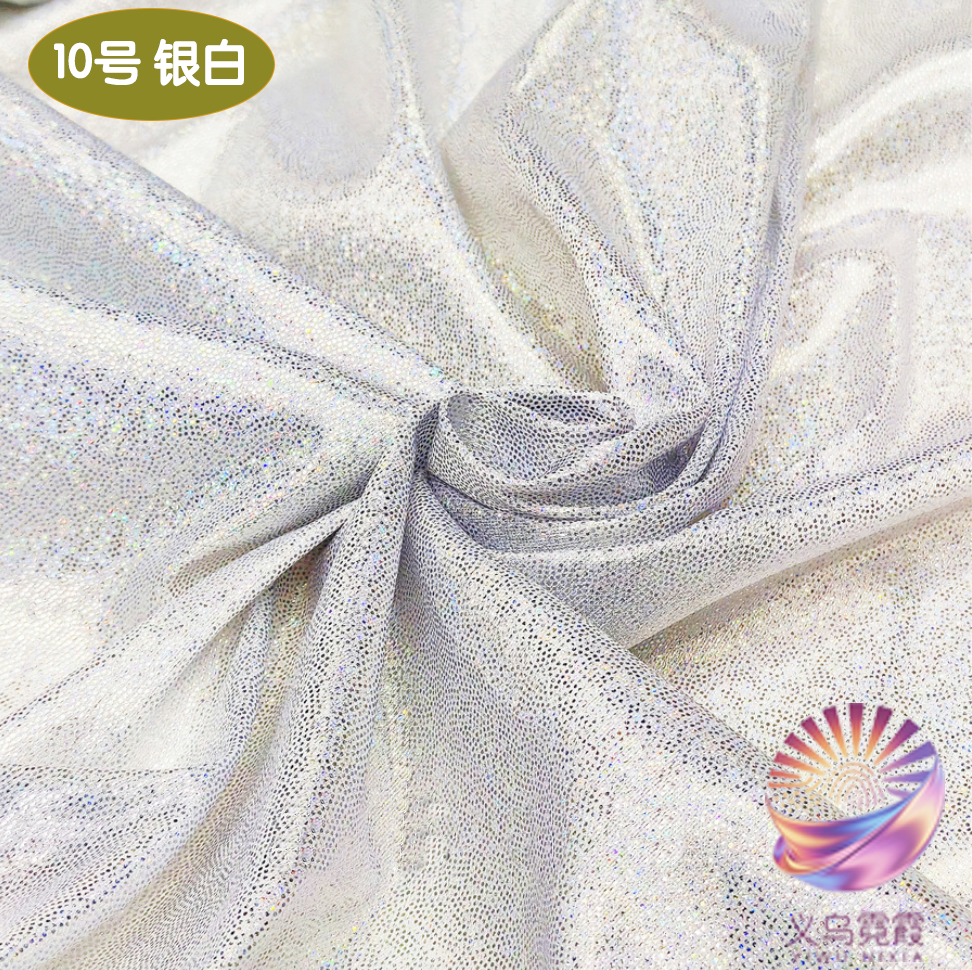
<style>
.page{position:relative;width:972px;height:970px}
.page>*{position:absolute;margin:0}
.t1{font:49.1px "STYuanti-SC-Bold";color:#ffffff;scale:0.97 1}
.t2{font:84.6px "STBaoliSC-Regular";color:#ffffff;scale:0.97 1}
</style>
<div class="page">
<p class="t1" style="left:54px;top:39px;width:190px;height:48px"><span class="t2">         </span>10号 银白</p>
</div>
